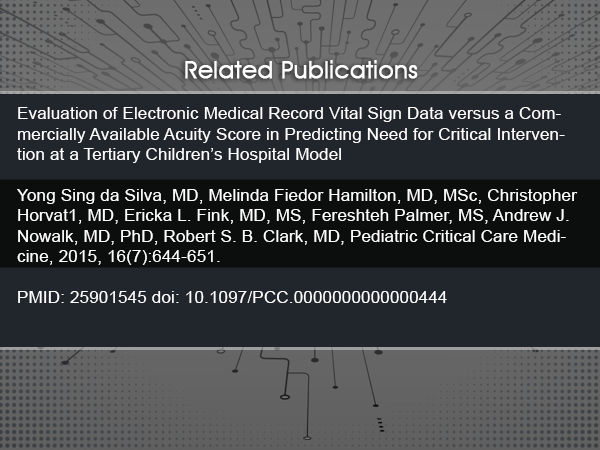
<style>
.page{position:relative;width:600px;height:450px;background:#20262c}
.page>*{position:absolute;margin:0}
.t1{font:24px "AvantGardeITCbyBT-Book";letter-spacing:0.01em;color:#ffffff;font-weight:bold}
.t2{font:17px "ArialMT";letter-spacing:0.01em;color:#ffffff}
</style>
<div class="page">
<p class="t1" style="left:185px;top:60px;width:233px;height:19px">Related Publications</p>
<p class="t2" style="left:17px;top:107px;width:561px;height:196px">Evaluation of Electronic Medical Record Vital Sign Data versus a Commercially Available Acuity Score in Predicting Need for Critical Intervention at a Tertiary Children’s Hospital Model<br><br>Yong Sing da Silva, MD, Melinda Fiedor Hamilton, MD, MSc, Christopher Horvat1, MD, Ericka L. Fink, MD, MS, Fereshteh Palmer, MS, Andrew J. Nowalk, MD, PhD, Robert S. B. Clark, MD, Pediatric Critical Care Medicine, 2015, 16(7):644-651. <br><br>PMID: 25901545 doi: 10.1097/PCC.0000000000000444</p>
</div>
